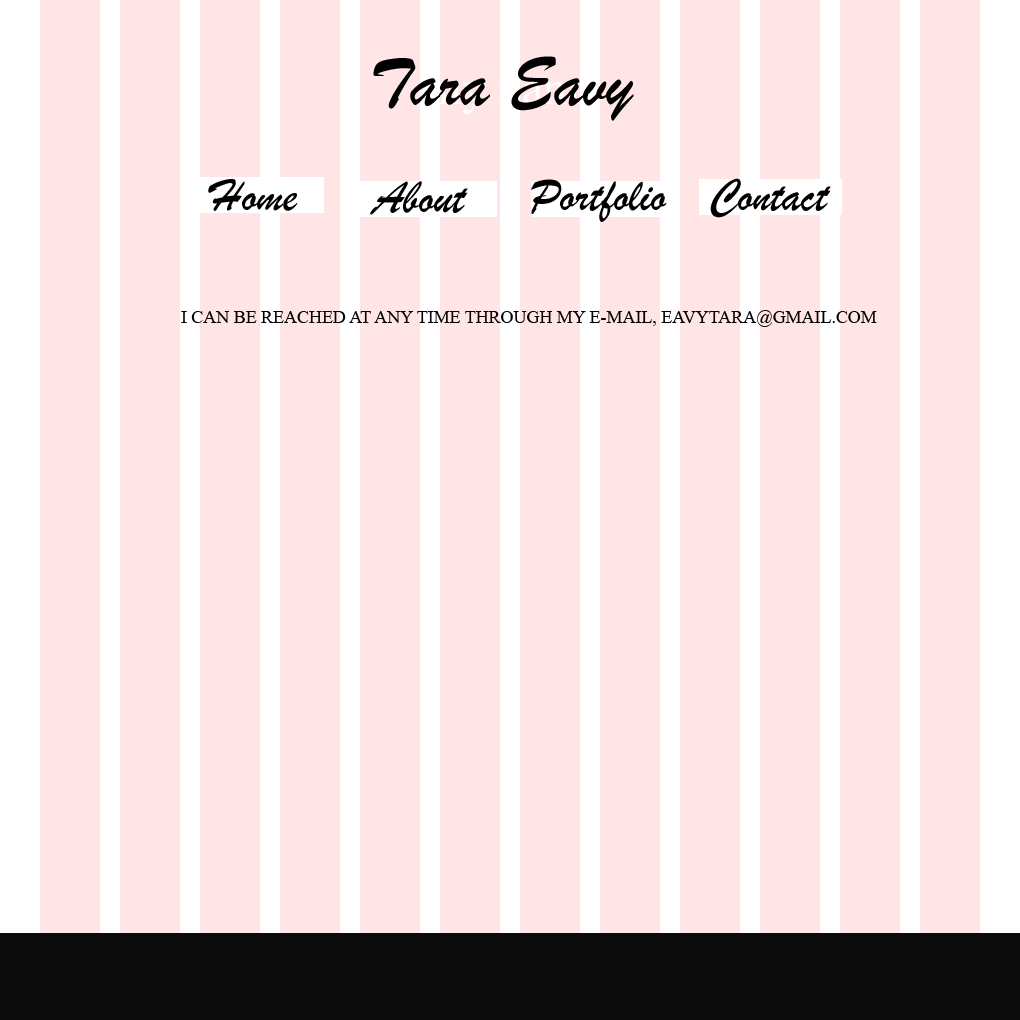
<style>
.page{position:relative;width:1020px;height:1020px;background:#ffe5e5}
.page>*{position:absolute;margin:0}
.t1{font:71.7px "BrushScriptMT";color:#000000}
.t2{font:47.8px "BrushScriptMT";color:#000000}
.t3{font:17.9px "TimesNewRomanPSMT";color:#000000;text-transform:uppercase}
</style>
<div class="page">
<p class="t1" style="left:373px;top:56px;width:261px;height:65px">Tara Eavy</p>
<p class="t2" style="left:208px;top:179px;width:90px;height:32px">Home</p>
<p class="t2" style="left:370px;top:181px;width:98px;height:34px">About</p>
<p class="t2" style="left:531px;top:179px;width:136px;height:43px">Portfolio</p>
<p class="t2" style="left:710px;top:178px;width:121px;height:40px">Contact</p>
<p class="t3" style="left:181px;top:310px;width:696px;height:17px">I can be reached at any time through my e-mail, eavytara@gmail.com</p>
</div>
